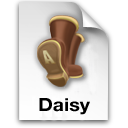
<style>
.page{position:relative;width:128px;height:128px;background:#ffffff}
.page>*{position:absolute;margin:0}
.t1{font:17.9px "HelveticaNeue-Bold";color:#000000;scale:1.09 1}
</style>
<div class="page">
<p class="t1" style="left:39px;top:98px;width:51px;height:17px">Daisy</p>
</div>
